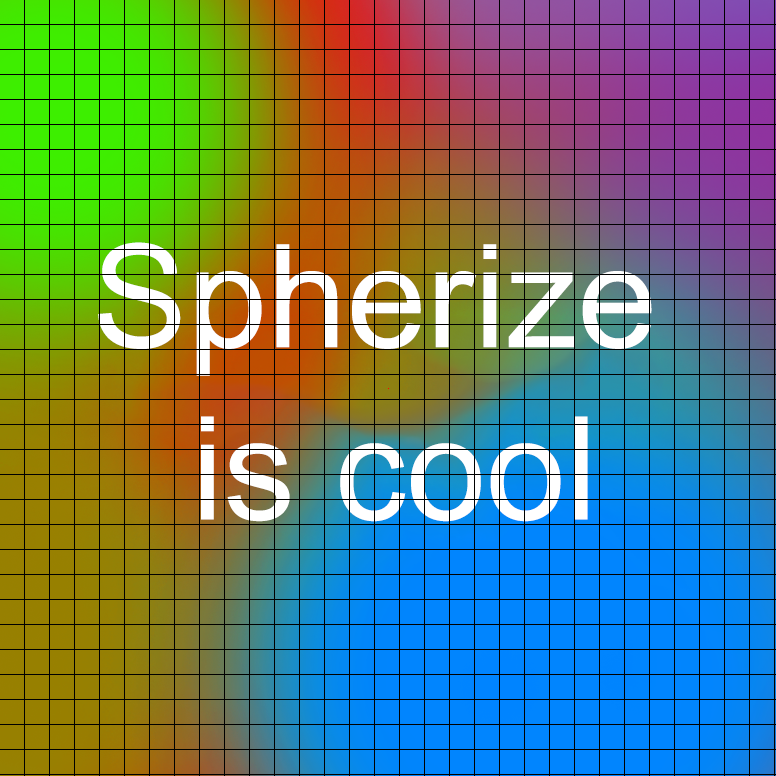
<style>
.page{position:relative;width:776px;height:776px}
.page>*{position:absolute;margin:0}
.t1{font:143.5px "ArialMT";color:#ffffff}
</style>
<div class="page">
<p class="t1" style="left:98px;top:242px;width:554px;height:280px;text-align:center">Spherize <br>is cool</p>
</div>
